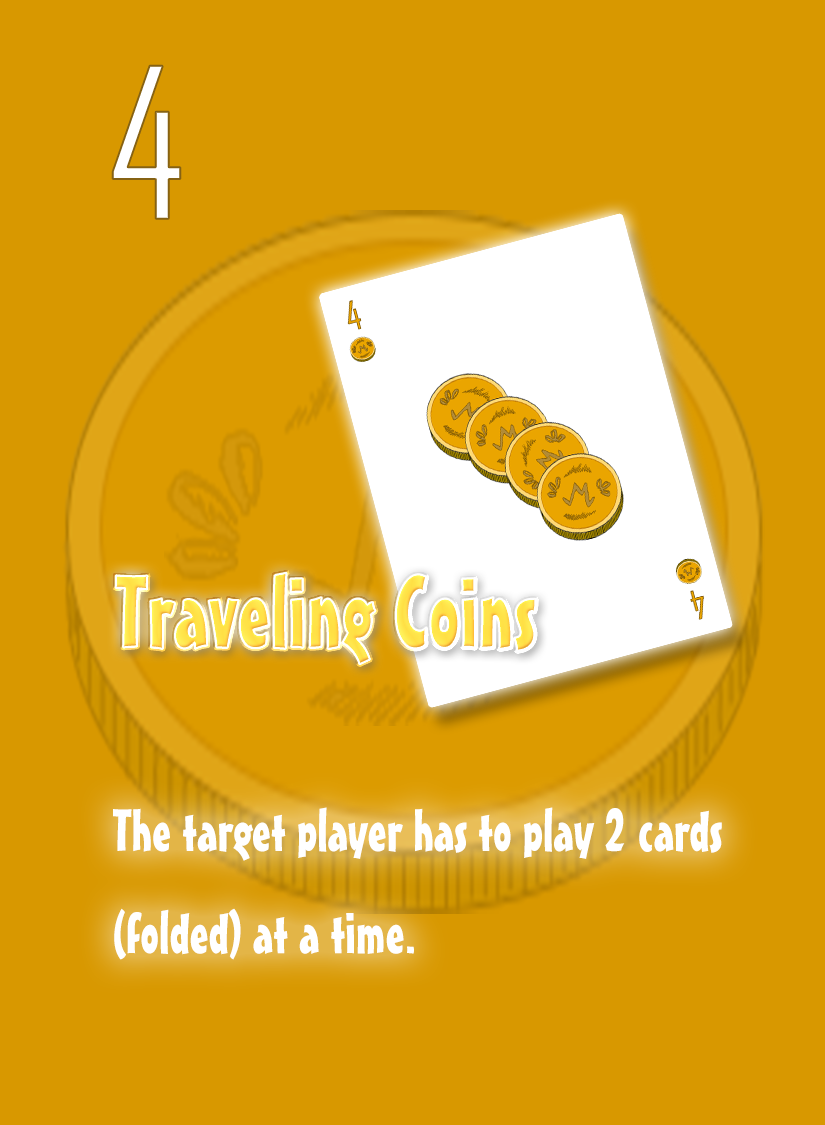
<style>
.page{position:relative;width:825px;height:1125px;background:#d89800}
.page>*{position:absolute;margin:0}
.t1{font:200px "AgencyFB-Reg";color:#ffffff}
.t2{font:100px "MisterEarlBT-Regular";color:#ffe34a}
.t3{font:58.3px "MisterEarlBT-Regular";color:#ffffff}
</style>
<div class="page">
<p class="t1" style="left:112px;top:65px;width:69px;height:154px">4</p>
<p class="t2" style="left:115px;top:572px;width:421px;height:92px">Traveling Coins</p>
<p class="t3" style="left:113px;top:807px;width:609px;height:153px">The target player has to play 2 cards <br>(folded) at a time.</p>
</div>
